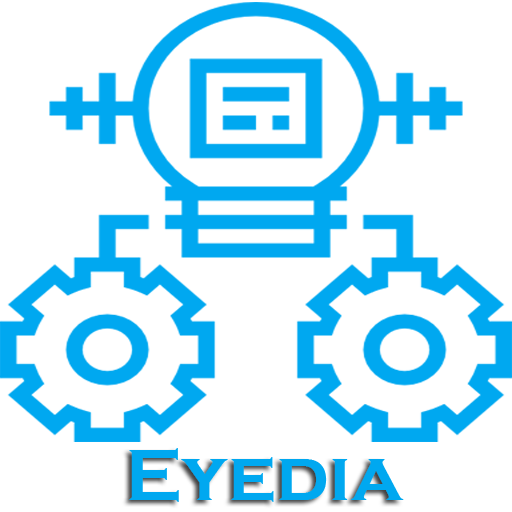
<style>
.page{position:relative;width:512px;height:512px;background:#ffffff}
.page>*{position:absolute;margin:0}
.t1{font:75px "CopperplateGothic-Bold";color:#00a8f0}
</style>
<div class="page">
<p class="t1" style="left:129px;top:448px;width:275px;height:54px">Eyedia</p>
</div>
